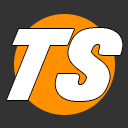
<style>
.page{position:relative;width:128px;height:128px;background:#333333}
.page>*{position:absolute;margin:0}
.t1{font:97.2px "Longhaul";color:#ffffff}
</style>
<div class="page">
<p class="t1" style="left:6px;top:28px;width:117px;height:73px">TS</p>
</div>
